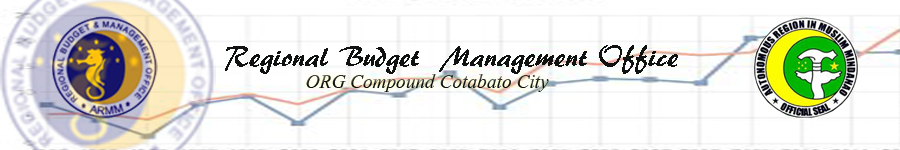
<style>
.page{position:relative;width:900px;height:150px;background:#ffffff}
.page>*{position:absolute;margin:0}
.t1{font:30px "ARBERKLEY";color:#101211}
.t2{font:24px "Vijaya";color:#101211}
</style>
<div class="page">
<p class="t1" style="left:225px;top:45px;width:453px;height:29px">Regional Budget  Management Office</p>
<p class="t2" style="left:306px;top:74px;width:243px;height:18px">ORG Compound Cotabato City</p>
</div>
